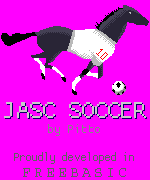
<style>
.page{position:relative;width:150px;height:180px;background:#ff00ff}
.page>*{position:absolute;margin:0}
.t1{font:24.6px "ProgCleanCo";letter-spacing:-0.04em;color:#c9c9c9}
.t2{font:24.6px "ProgCleanCo";letter-spacing:-0.04em}
.t3{font:8.6px "ProgCleanCo";letter-spacing:-0.04em;color:#868686}
.t4{font:6.1px/20px "ProgCleanCo";letter-spacing:-0.16em;color:#606060}
.t5{font:14.6px/16px "Courier-Bold";letter-spacing:0.22em;color:#606060}
</style>
<div class="page">
<p class="t1" style="left:4px;top:102px;width:142px;height:16px">JASC SOCCER</p>
<p class="t2" style="left:5px;top:103px;width:142px;height:16px">JASC SOCCER</p>
<p class="t3" style="left:48px;top:124px;width:52px;height:12px">by Pitto</p>
<p class="t4" style="left:14px;top:152px;width:120px;height:25px;text-align:center">Proudly developed in<br><span class="t5">FREEBASIC</span></p>
</div>
